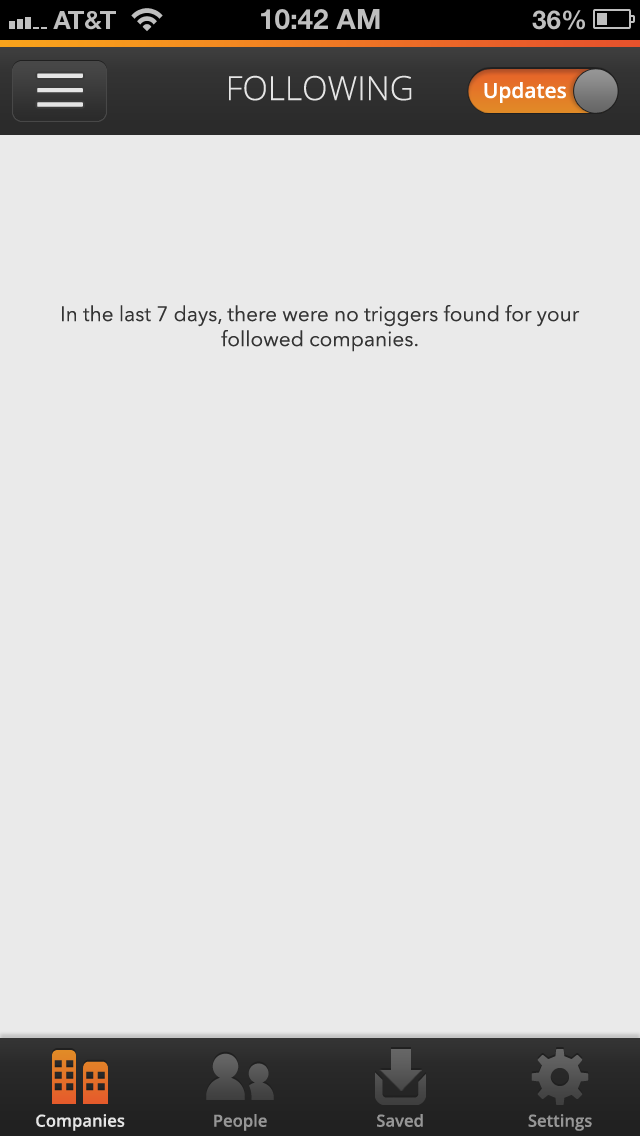
<style>
.page{position:relative;width:640px;height:1136px;background:#eaeaea}
.page>*{position:absolute;margin:0}
.t1{font:33.3px "OpenSans-Light";color:#e5e5e5}
.t2{font:20.8px "OpenSans-Semibold";color:#ffffff}
.t3{font:20.8px "AvenirNext-Regular";color:#343434}
.t4{font:16.7px "OpenSans-Semibold";color:#e5e5e5}
.t5{font:16.7px "OpenSans-Semibold";color:#969696}
</style>
<div class="page">
<p class="t1" style="left:229px;top:75px;width:183px;height:26px">FOLLOWING</p>
<p class="t2" style="left:484px;top:82px;width:82px;height:21px">Updates</p>
<p class="t3" style="left:62px;top:305px;width:518px;height:47px;text-align:center">In the last 7 days, there were no triggers found for your followed companies.</p>
<p class="t4" style="left:36px;top:1114px;width:89px;height:17px">Companies</p>
<p class="t5" style="left:214px;top:1114px;width:53px;height:17px">People</p>
<p class="t5" style="left:377px;top:1114px;width:46px;height:13px">Saved</p>
<p class="t5" style="left:528px;top:1114px;width:64px;height:17px">Settings</p>
</div>
